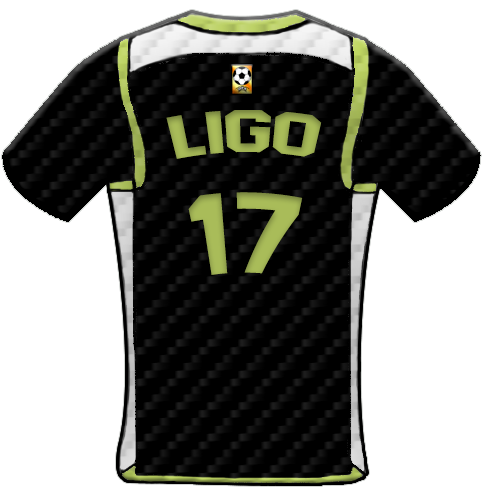
<style>
.page{position:relative;width:482px;height:494px;background:#ffffff}
.page>*{position:absolute;margin:0}
.t1{font:59.4px "AdidasHalfBlock2016";color:#a9bc59;scale:1.13 1}
.t2{font:113.8px "AdidasHalfBlock2016";color:#a9bc59}
</style>
<div class="page">
<p class="t1" style="left:166px;top:110px;width:156px;height:49px">Ligo</p>
<p class="t2" style="left:188px;top:192px;width:115px;height:83px">17</p>
</div>
